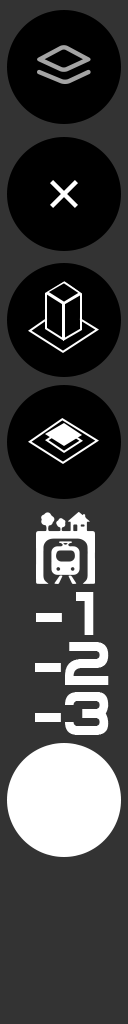
<style>
.page{position:relative;width:128px;height:1024px;background:#333333}
.page>*{position:absolute;margin:0}
.t1{font:72.1px "Archangelsk";color:#ffffff}
</style>
<div class="page">
<p class="t1" style="left:36px;top:592px;width:58px;height:43px">- 1</p>
<p class="t1" style="left:35px;top:642px;width:74px;height:43px">-2</p>
<p class="t1" style="left:35px;top:692px;width:74px;height:43px">-3</p>
</div>
